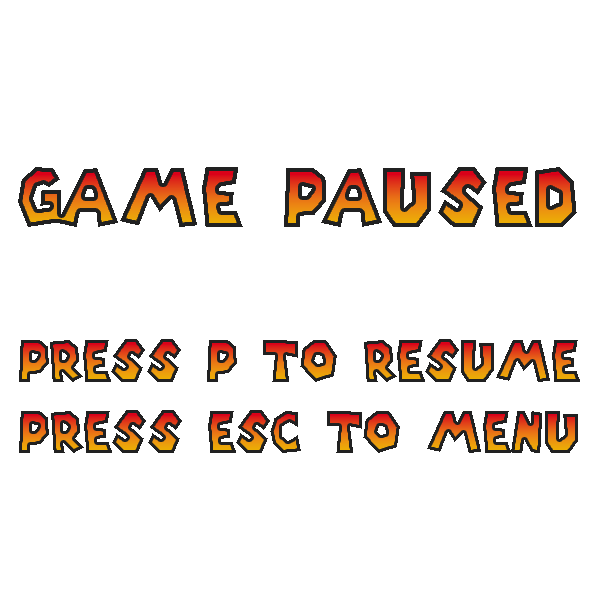
<style>
.page{position:relative;width:600px;height:600px;background:#ffffff}
.page>*{position:absolute;margin:0}
.t1{font:80px "SuperMarioGalaxy";letter-spacing:0.075em;scale:0.83 1}
.t2{font:56.7px "SuperMarioGalaxy";letter-spacing:0.025em;scale:0.83 1}
</style>
<div class="page">
<p class="t1" style="left:18px;top:167px;width:559px;height:60px">GAME PAUSED</p>
<p class="t2" style="left:19px;top:339px;width:561px;height:43px">press p to resume</p>
<p class="t2" style="left:19px;top:410px;width:559px;height:43px">press esc to menu</p>
</div>
